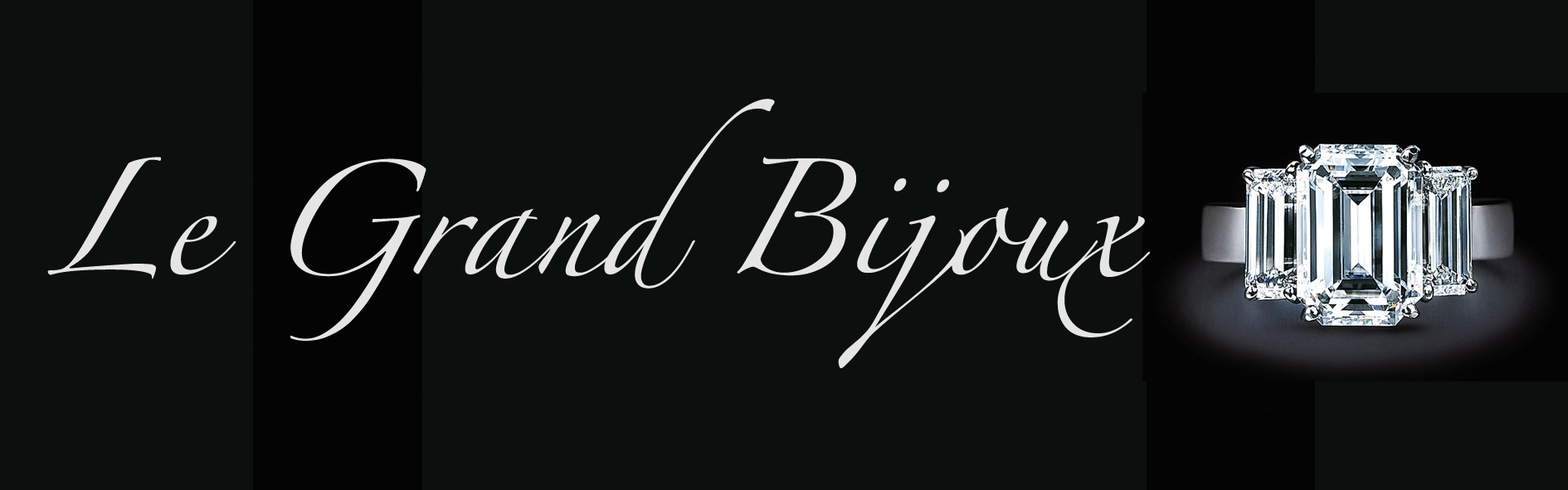
<style>
.page{position:relative;width:1568px;height:490px;background:#0b0f0e}
.page>*{position:absolute;margin:0}
.t1{font:102.8px "Zapfino";color:#e5e5e5}
</style>
<div class="page">
<p class="t1" style="left:47px;top:99px;width:1104px;height:270px">Le Grand Bijoux</p>
</div>
